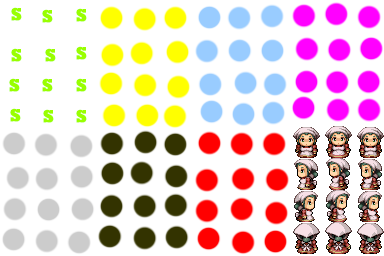
<style>
.page{position:relative;width:384px;height:256px;background:#ffffff}
.page>*{position:absolute;margin:0}
.t1{font:18px "Rockwell-ExtraBold";color:#99ff00}
</style>
<div class="page">
<p class="t1" style="left:11px;top:7px;width:11px;height:14px">S</p>
<p class="t1" style="left:42px;top:9px;width:11px;height:14px">S</p>
<p class="t1" style="left:76px;top:8px;width:11px;height:14px">S</p>
<p class="t1" style="left:11px;top:48px;width:11px;height:14px">S</p>
<p class="t1" style="left:45px;top:48px;width:11px;height:14px">S</p>
<p class="t1" style="left:76px;top:46px;width:11px;height:14px">S</p>
<p class="t1" style="left:9px;top:78px;width:11px;height:14px">S</p>
<p class="t1" style="left:42px;top:78px;width:11px;height:14px">S</p>
<p class="t1" style="left:76px;top:78px;width:11px;height:14px">S</p>
<p class="t1" style="left:10px;top:108px;width:11px;height:14px">S</p>
<p class="t1" style="left:43px;top:109px;width:11px;height:14px">S</p>
<p class="t1" style="left:76px;top:109px;width:11px;height:14px">S</p>
</div>
